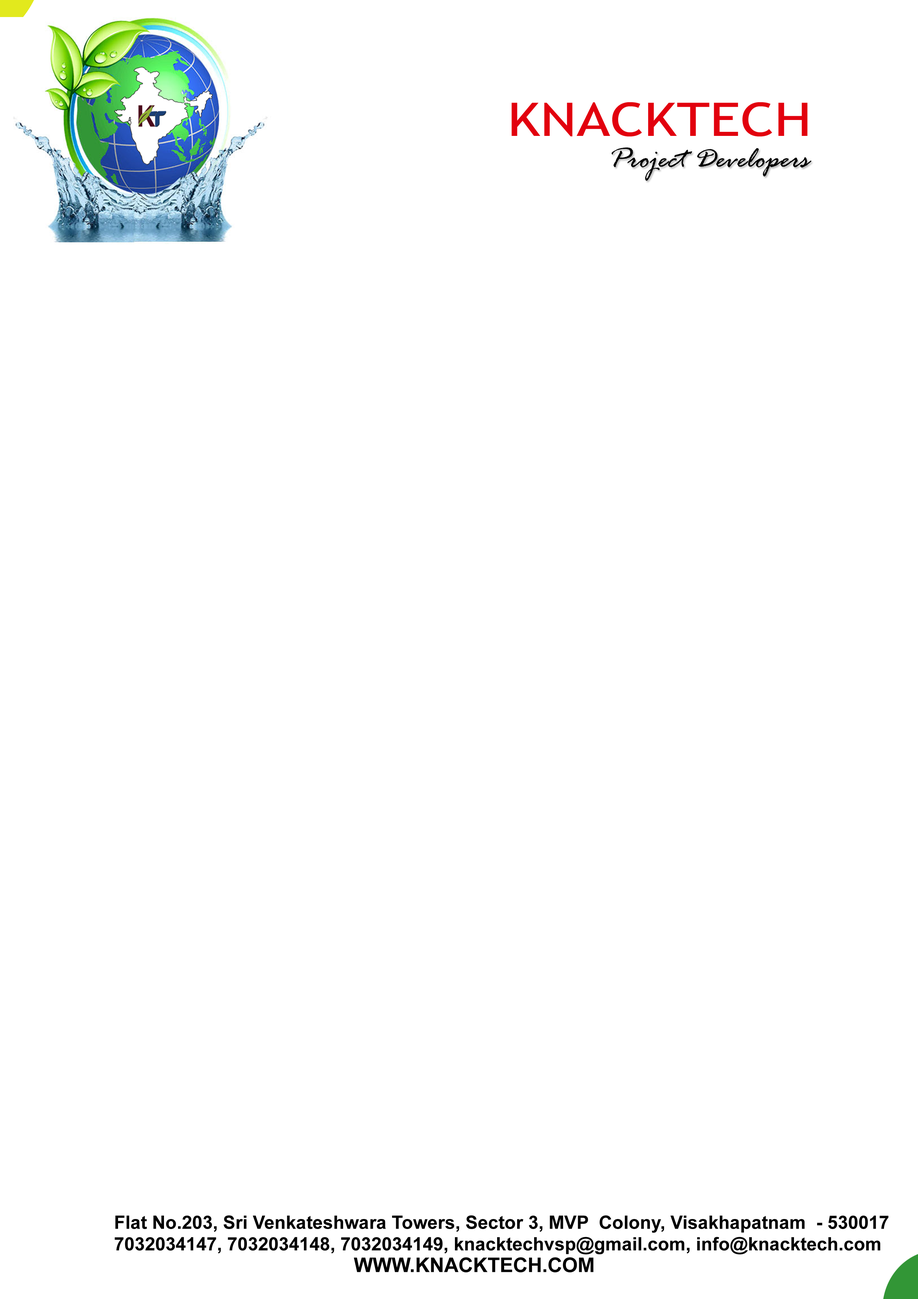
<style>
.page{position:relative;width:918px;height:1299px;background:#ffffff}
.page>*{position:absolute;margin:0}
.t1{font:18.5px/21.6px "Arial-BoldMT";color:#010101}
.t2{font:20.1px/21.6px "Arial-BoldMT";color:#010101}
</style>
<div class="page">
<p class="t1" style="left:115px;top:1215px;width:774px;height:57px">Flat No.203, Sri Venkateshwara Towers, Sector 3, MVP  Colony, Visakhapatnam  - 530017<br>7032034147, 7032034148, 7032034149, knacktechvsp@gmail.com, info@knacktech.com<br>                  <span class="t2">WWW.KNACKTECH.COM</span></p>
</div>
